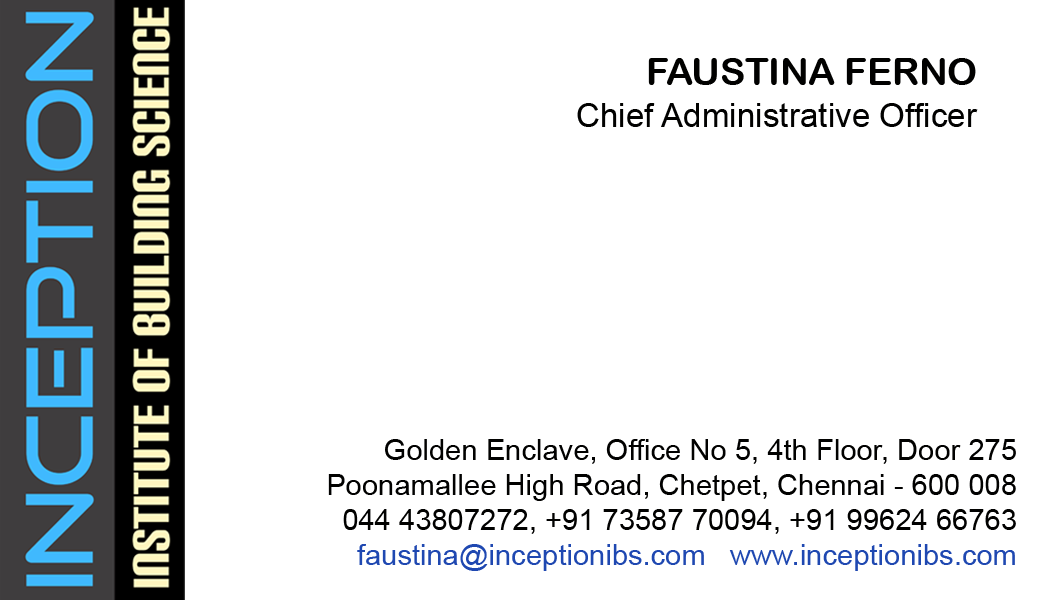
<style>
.page{position:relative;width:1050px;height:600px;background:#ffffff}
.page>*{position:absolute;margin:0}
.t1{font:37.5px "ArialRoundedMTBold";color:#010100}
.t2{font:33.3px "ArialMT";color:#010100}
.t3{font:29.2px "ArialMT";color:#010100}
.t4{font:29.2px "ArialMT";color:#1f48b1}
</style>
<div class="page">
<p class="t1" style="left:648px;top:58px;width:328px;height:27px">FAUSTINA FERNO</p>
<p class="t2" style="left:577px;top:103px;width:401px;height:24px">Chief Administrative Officer</p>
<p class="t3" style="left:328px;top:439px;width:688px;height:132px;text-align:right">Golden Enclave, Office No 5, 4th Floor, Door 275<br>Poonamallee High Road, Chetpet, Chennai - 600 008<br>044 43807272, +91 73587 70094, +91 99624 66763<br><span class="t4">faustina@inceptionibs.com   www.inceptionibs.com</span></p>
</div>
